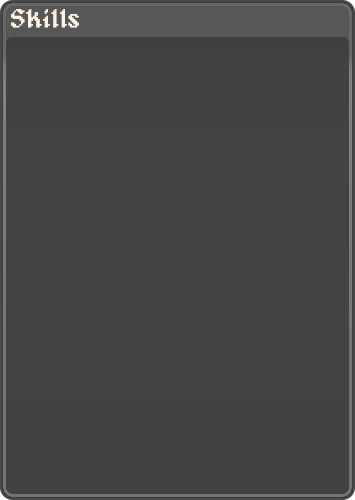
<style>
.page{position:relative;width:355px;height:500px;background:#434343}
.page>*{position:absolute;margin:0}
.t1{font:27px "Alagard";color:#fff3e4}
</style>
<div class="page">
<p class="t1" style="left:11px;top:9px;width:68px;height:19px">Skills</p>
</div>
